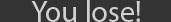
<style>
.page{position:relative;width:171px;height:22px;background:#333333}
.page>*{position:absolute;margin:0}
.t1{font:30px "MyriadPro-Regular";color:#d1d1d1}
</style>
<div class="page">
<p class="t1" style="left:31px;top:0px;width:109px;height:22px">You lose!</p>
</div>
